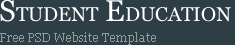
<style>
.page{position:relative;width:235px;height:45px;background:#2d3f45}
.page>*{position:absolute;margin:0}
.t1{font:20px "Georgia";color:#ffffff}
.t2{font:30px "Georgia";color:#ffffff}
.t3{font:12px "Georgia";color:#999999}
</style>
<div class="page">
<p class="t1" style="left:0px;top:0px;width:231px;height:22px"><span class="t2">S</span>TUDENT<span class="t2"> E</span>DUCATION</p>
<p class="t3" style="left:0px;top:32px;width:156px;height:13px">Free PSD Website Template</p>
</div>
